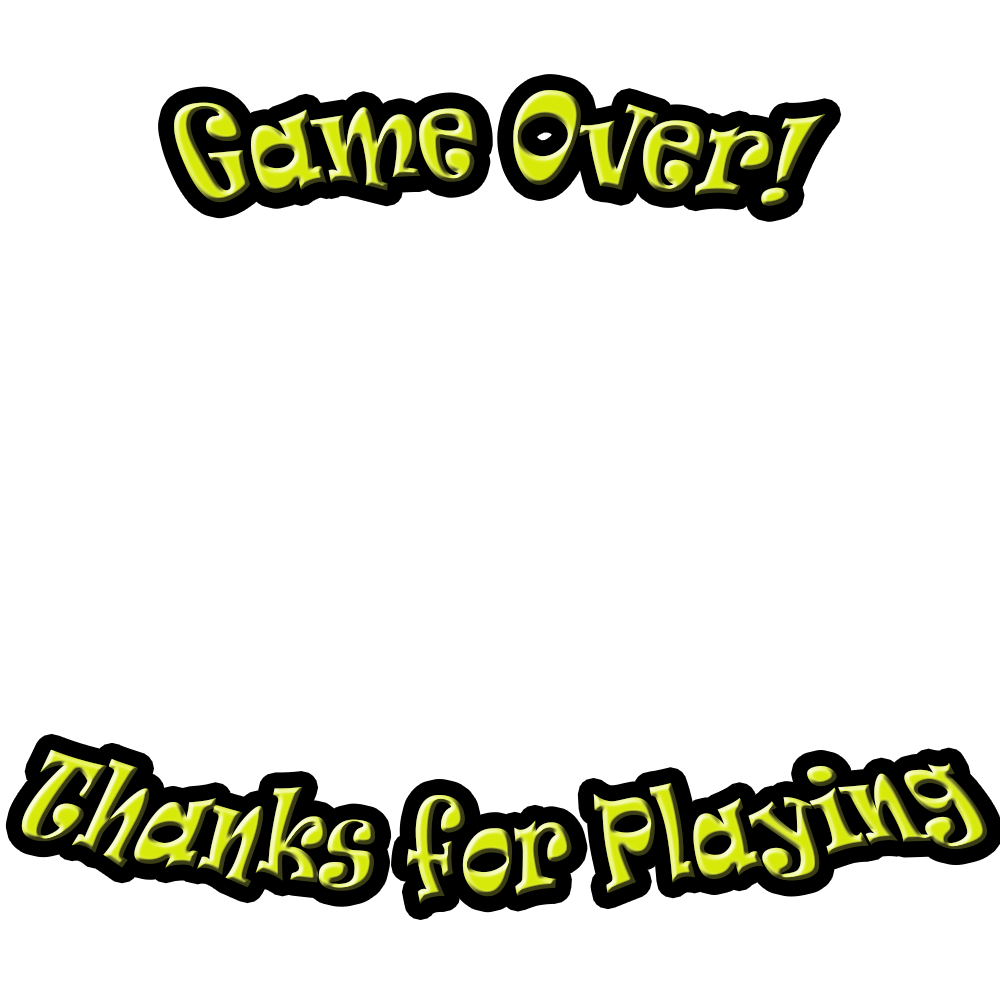
<style>
.page{position:relative;width:1000px;height:1000px;background:#ffffff}
.page>*{position:absolute;margin:0}
.t1{font:90.2px "Ravie"}
</style>
<div class="page">
<p class="t1" style="left:21px;top:90px;width:966px;height:815px;text-align:center">Game Over!<br><br><br><br><br>Thanks for Playing</p>
</div>
